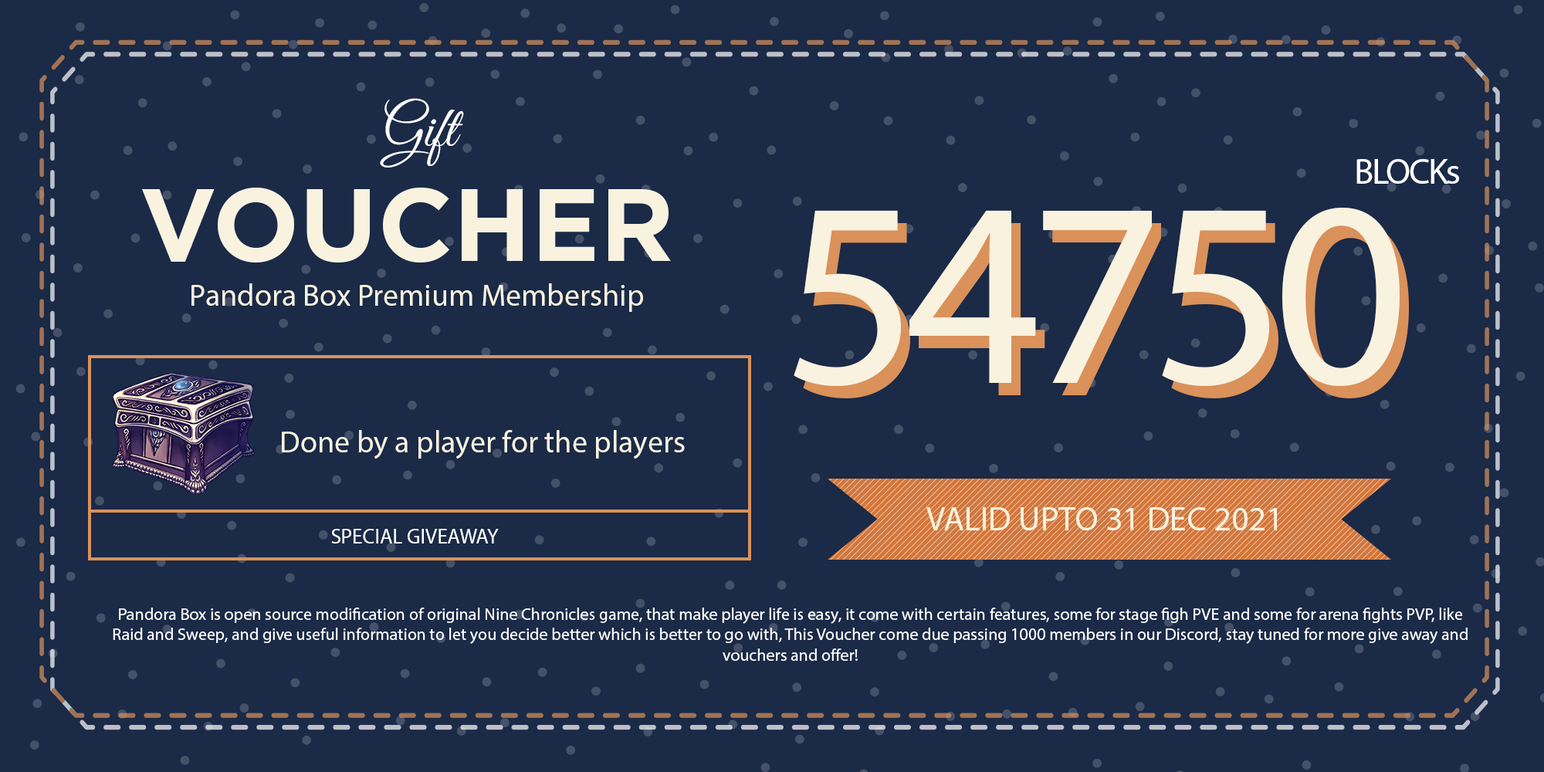
<style>
.page{position:relative;width:1544px;height:772px;background:#1a2a47}
.page>*{position:absolute;margin:0}
.t1{font:57.9px "GreatVibes-Regular";color:#ffffff}
.t2{font:36.3px "MyriadPro-Regular";letter-spacing:-0.05em;color:#ffffff}
.t3{font:102.8px "Gotham-Bold";color:#f9f2df;text-transform:uppercase}
.t4{font:264.8px "MyriadPro-Regular";letter-spacing:-0.05em;color:#f9f2df}
.t5{font:30.9px "MyriadPro-Regular";color:#f9f2df}
.t6{font:34px "MyriadPro-Regular";color:#f9f2df;text-transform:uppercase}
.t7{font:21px "MyriadPro-Regular";color:#ffffff}
.t8{font:17px "MyriadPro-Regular";color:#ffffff}
</style>
<div class="page">
<p class="t1" style="left:380px;top:98px;width:84px;height:70px">Gift</p>
<p class="t2" style="left:1357px;top:159px;width:102px;height:25px">BLOCKs</p>
<p class="t3" style="left:142px;top:187px;width:529px;height:76px">Voucher</p>
<p class="t4" style="left:794px;top:208px;width:606px;height:178px">54750</p>
<p class="t5" style="left:191px;top:283px;width:452px;height:29px">Pandora Box Premium Membership</p>
<p class="t5" style="left:282px;top:430px;width:403px;height:29px">Done by a player for the players</p>
<p class="t6" style="left:927px;top:507px;width:350px;height:23px">valid upto 31 DEC 2021</p>
<p class="t7" style="left:331px;top:529px;width:168px;height:15px">SPECIAL GIVEAWAY</p>
<p class="t8" style="left:113px;top:608px;width:1355px;height:53px;text-align:center">Pandora Box is open source modification of original Nine Chronicles game, that make player life is easy, it come with certain features, some for stage figh PVE and some for arena fights PVP, like Raid and Sweep, and give useful information to let you decide better which is better to go with, This Voucher come due passing 1000 members in our Discord, stay tuned for more give away and vouchers and offer!</p>
</div>
